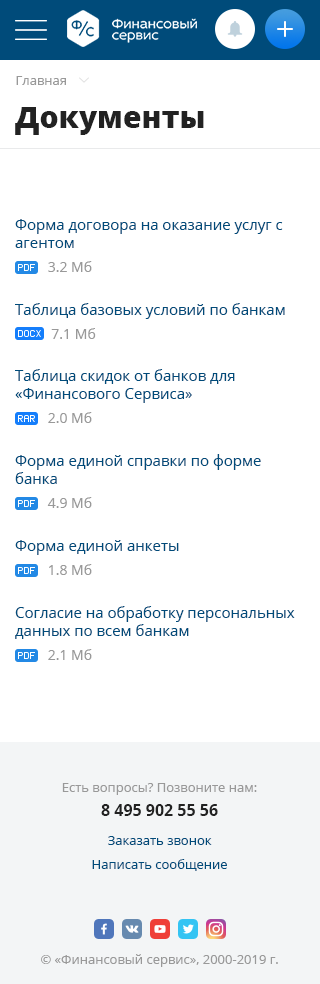
<style>
.page{position:relative;width:320px;height:984px;background:#ffffff}
.page>*{position:absolute;margin:0}
.t1{font:13px "OpenSans";color:#999999}
.t2{font:30px "OpenSans-Extrabold";color:#222222}
.t3{font:15px "OpenSans";color:#004b7a}
.t4{font:14px/24px "OpenSans";color:#999999}
.t5{font:13px/24px "OpenSans";color:#999999}
.t6{font:16px/24px "OpenSans-Bold";color:#222222}
.t7{font:13px/24px "OpenSans";color:#004b7a}
</style>
<div class="page">
<p class="t1" style="left:16px;top:76px;width:50px;height:9px">Главная</p>
<p class="t2" style="left:15px;top:107px;width:189px;height:28px">Документы</p>
<p class="t3" style="left:15px;top:219px;width:268px;height:53px">Форма договора на оказание услуг с агентом  <br><span class="t4">         3.2 Мб</span></p>
<p class="t3" style="left:15px;top:303px;width:270px;height:36px">Таблица базовых условий по банкам<br><span class="t4">          7.1 Мб</span></p>
<p class="t3" style="left:15px;top:369px;width:220px;height:54px">Таблица скидок от банков для «Финансового Сервиса»<br><span class="t4">         2.0 Мб</span></p>
<p class="t3" style="left:15px;top:454px;width:246px;height:54px">Форма единой справки по форме банка <br><span class="t4">         4.9 Мб</span></p>
<p class="t3" style="left:15px;top:540px;width:164px;height:35px">Форма единой анкеты<br><span class="t4">         1.8 Мб</span></p>
<p class="t3" style="left:15px;top:606px;width:280px;height:54px">Согласие на обработку персональных данных по всем банкам<br><span class="t4">         2.1 Мб</span></p>
<p class="t5" style="left:62px;top:783px;width:195px;height:33px;text-align:center">Есть вопросы? Позвоните нам:<br><span class="t6">8 495 902 55 56</span></p>
<p class="t7" style="left:92px;top:836px;width:135px;height:35px;text-align:center">Заказать звонок          <br>Написать сообщение</p>
<p class="t1" style="left:41px;top:954px;width:237px;height:13px">© «Финансовый сервис», 2000-2019 г.</p>
</div>
